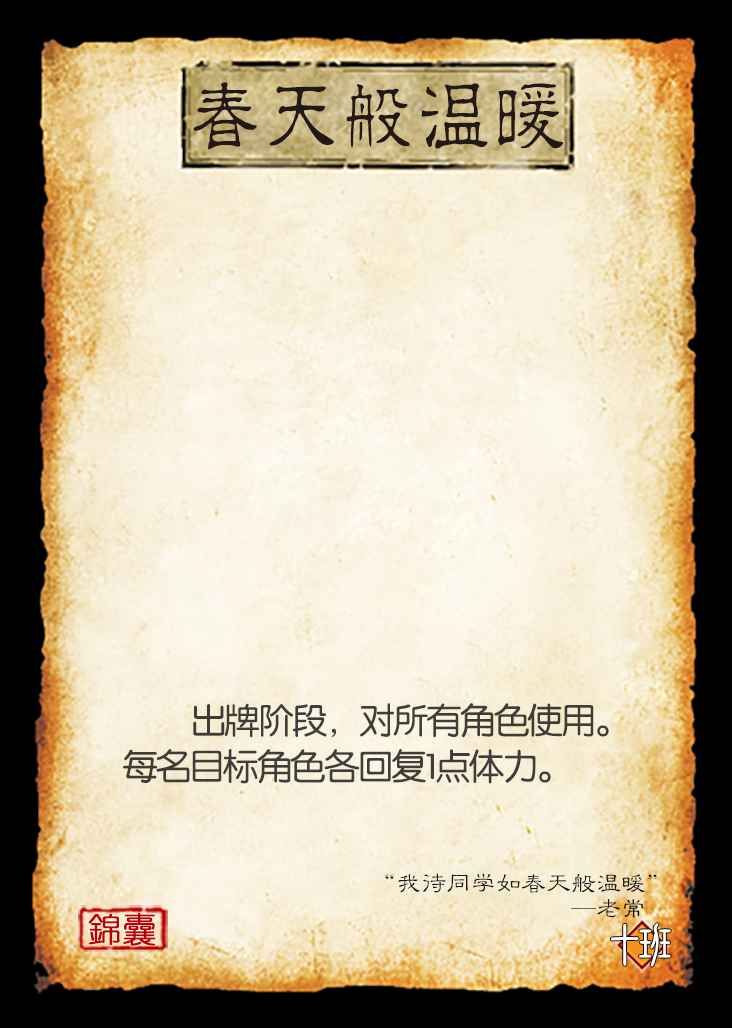
<style>
.page{position:relative;width:732px;height:1028px}
.page>*{position:absolute;margin:0}
.t1{font:80.4px "JMFLS_GBK";color:#221815;scale:0.95 1}
.t2{font:35.4px/45.8px "FZY3JW--GB1-0";letter-spacing:-0.05em;color:#3e3d38}
.t3{font:25px/25px "FZLBJW--GB1-0";color:#151515}
.t4{font:33.3px "YouYuan";color:#ba0007;font-weight:bold}
.t5{font:50px "DFNewChuan-W5-WINP-BF";letter-spacing:-0.4em;color:#ffffff}
</style>
<div class="page">
<p class="t1" style="left:193px;top:82px;width:370px;height:68px">春天般溫暖</p>
<p class="t2" style="left:123px;top:703px;width:486px;height:81px">出牌阶段，对所有角色使用。每名目标角色各回复1点体力。</p>
<p class="t3" style="left:385px;top:873px;width:272px;height:45px;text-align:right">“我待同学如春天般温暖”<br>                                      —老常</p>
<p class="t4" style="left:88px;top:913px;width:68px;height:33px">錦囊</p>
<p class="t5" style="left:611px;top:923px;width:60px;height:44px">十班</p>
</div>
